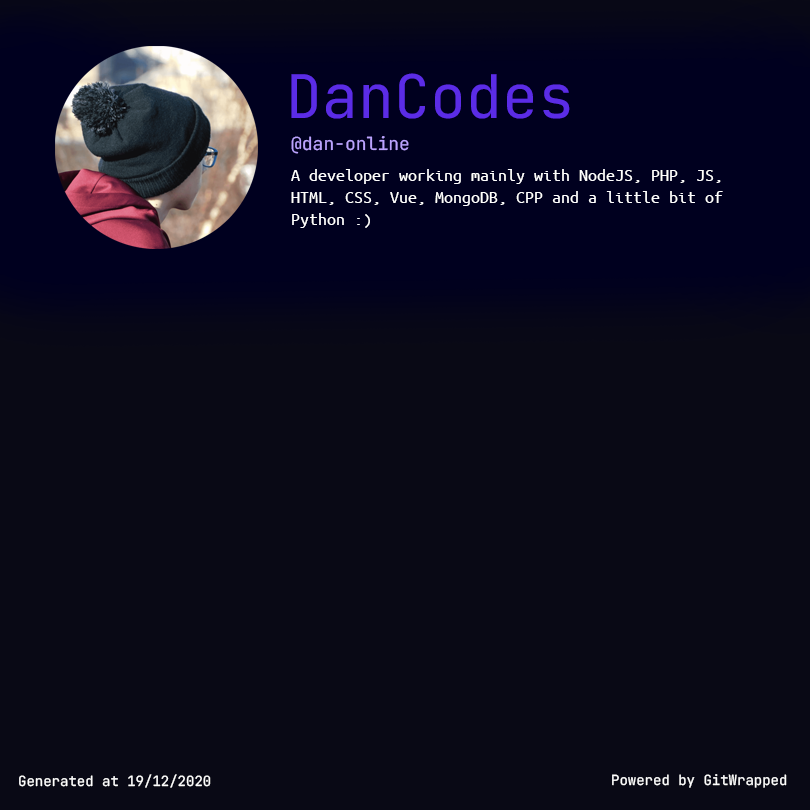
<style>
.page{position:relative;width:810px;height:810px;background:#090915}
.page>*{position:absolute;margin:0}
.t1{font:60px "JetBrainsMono-Regular";color:#5b2ce6}
.t2{font:18px "JetBrainsMono-Regular";color:#baa3ff}
.t3{font:18px "UbuntuMono-Regular";color:#ffffff}
.t4{font:14px "JetBrainsMono-Regular";color:#ffffff}
</style>
<div class="page">
<p class="t1" style="left:291px;top:73px;width:279px;height:46px">DanCodes</p>
<p class="t2" style="left:291px;top:136px;width:118px;height:18px">@dan-online</p>
<p class="t3" style="left:291px;top:169px;width:432px;height:59px">A developer working mainly with NodeJS, PHP, JS, HTML, CSS, Vue, MongoDB, CPP and a little bit of Python :)</p>
<p class="t4" style="left:19px;top:774px;width:192px;height:14px">Generated at 19/12/2020</p>
<p class="t4" style="left:612px;top:774px;width:175px;height:14px">Powered by GitWrapped</p>
</div>
